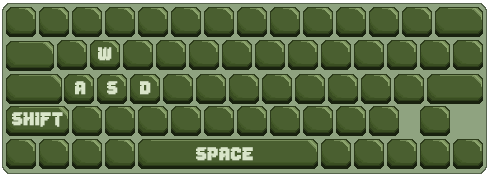
<style>
.page{position:relative;width:490px;height:180px;background:#4a5f30}
.page>*{position:absolute;margin:0}
.t1{font:25px "Lady-Radical";color:#d9e5c9;font-weight:bold}
</style>
<div class="page">
<p class="t1" style="left:98px;top:47px;width:14px;height:14px">w</p>
<p class="t1" style="left:75px;top:81px;width:11px;height:14px">a</p>
<p class="t1" style="left:107px;top:81px;width:11px;height:14px">s</p>
<p class="t1" style="left:140px;top:81px;width:11px;height:14px">d</p>
<p class="t1" style="left:12px;top:112px;width:51px;height:15px">shift</p>
<p class="t1" style="left:196px;top:147px;width:57px;height:14px">space</p>
</div>
